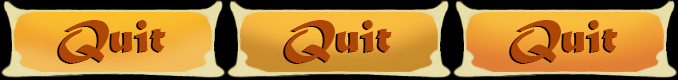
<style>
.page{position:relative;width:678px;height:80px}
.page>*{position:absolute;margin:0}
.t1{font:48px "MaturaMTScriptCapitals";color:#ae4605}
.t2{font:48px "MaturaMTScriptCapitals";color:#b04705}
</style>
<div class="page">
<p class="t1" style="left:57px;top:21px;width:107px;height:43px">Quit</p>
<p class="t2" style="left:59px;top:20px;width:107px;height:43px">Quit</p>
<p class="t1" style="left:283px;top:21px;width:107px;height:43px">Quit</p>
<p class="t2" style="left:285px;top:20px;width:107px;height:43px">Quit</p>
<p class="t1" style="left:509px;top:21px;width:107px;height:43px">Quit</p>
<p class="t2" style="left:511px;top:20px;width:107px;height:43px">Quit</p>
</div>
